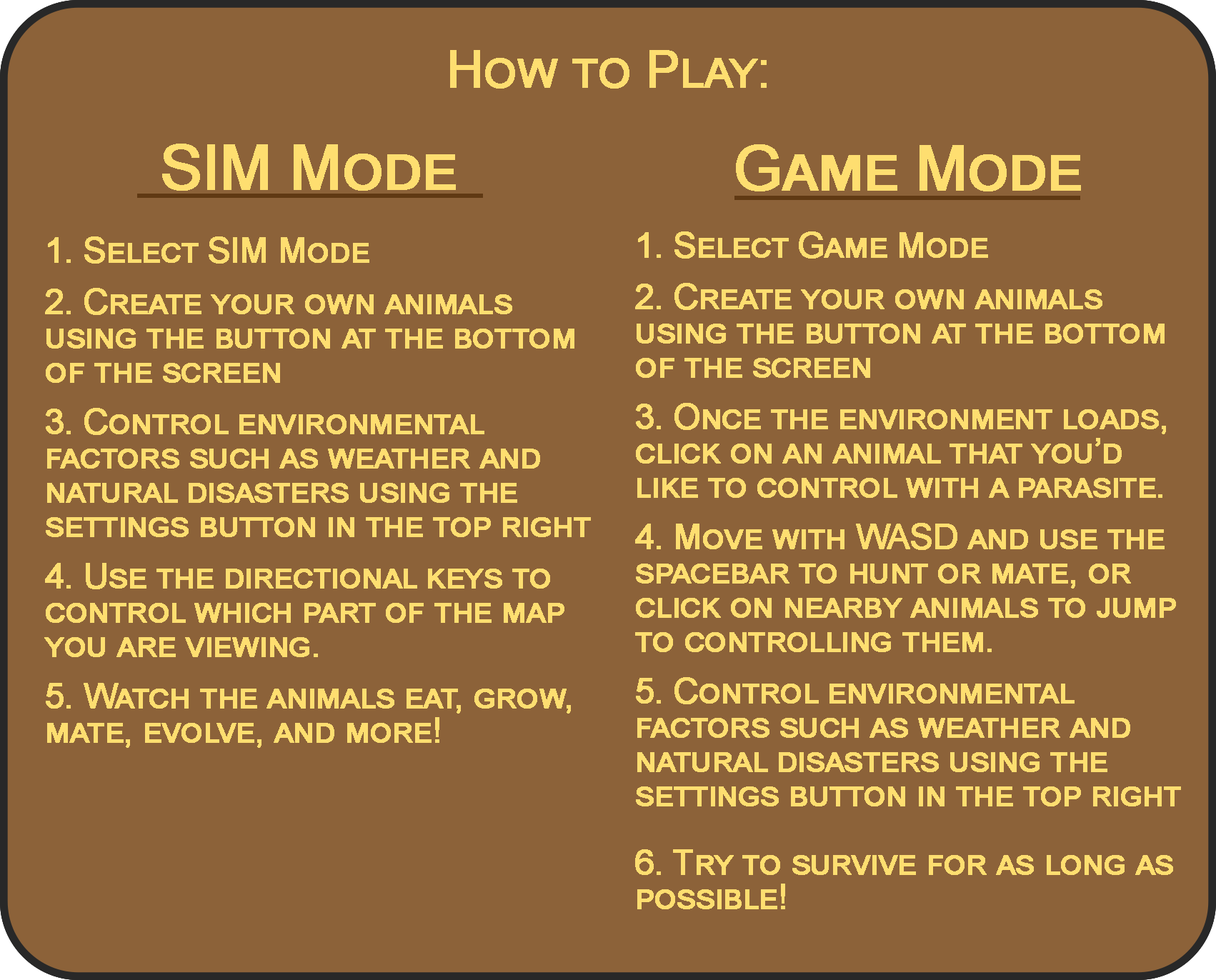
<style>
.page{position:relative;width:1216px;height:980px;background:#8c6239}
.page>*{position:absolute;margin:0}
.t1{font:51.5px "ArialMT";letter-spacing:-0.025em;color:#fede70;font-variant:small-caps;font-weight:bold}
.t2{font:62.8px "ArialMT";letter-spacing:-0.025em;color:#fede70;font-variant:small-caps;font-weight:bold}
.t3{font:34.3px/34.3px "ArialMT";letter-spacing:-0.025em;color:#fede70;font-variant:small-caps;font-weight:bold}
.t4{font:34.3px/12.9px "ArialMT";letter-spacing:-0.025em;color:#fede70;font-variant:small-caps;font-weight:bold}
.t5{font:34.3px/51.5px "ArialMT";letter-spacing:-0.025em;color:#fede70;font-variant:small-caps;font-weight:bold}
</style>
<div class="page">
<p class="t1" style="left:450px;top:50px;width:317px;height:39px">How to Play:</p>
<p class="t2" style="left:162px;top:144px;width:294px;height:47px">SIM Mode</p>
<p class="t2" style="left:736px;top:144px;width:345px;height:48px">Game Mode</p>
<p class="t3" style="left:635px;top:232px;width:546px;height:678px"><span class="t4">1. Select Game Mode</span><span class="t5"><br>2. Create your own animals<br></span>using the button at the bottom<br>of the screen<span class="t5"><br>3. Once the environment loads,</span> <br>click on an animal that you’d<br>like to control with a parasite.<span class="t5"><br>4. Move with WASD and use the </span><br>spacebar to hunt or mate, or <br>click on nearby animals to jump<br>to controlling them.<br><span class="t5">5. </span>Control environmental<br>factors such as weather and<br>natural disasters using the <br>settings button in the top right<br><br>6. Try to survive for as long as<br>possible!</p>
<p class="t3" style="left:44px;top:237px;width:547px;height:511px"><span class="t4">1. Select SIM Mode</span><span class="t5"><br>2. Create your own animals<br></span>using the button at the bottom<br>of the screen<span class="t5"><br>3. </span>Control environmental<br>factors such as weather and<br>natural disasters using the <br>settings button in the top right<span class="t5"><br>4. Use the directional keys to </span><br>control which part of the map<br>you are viewing.<br><span class="t5">5. </span>Watch the animals eat, grow,<br>mate, evolve, and more!</p>
</div>
